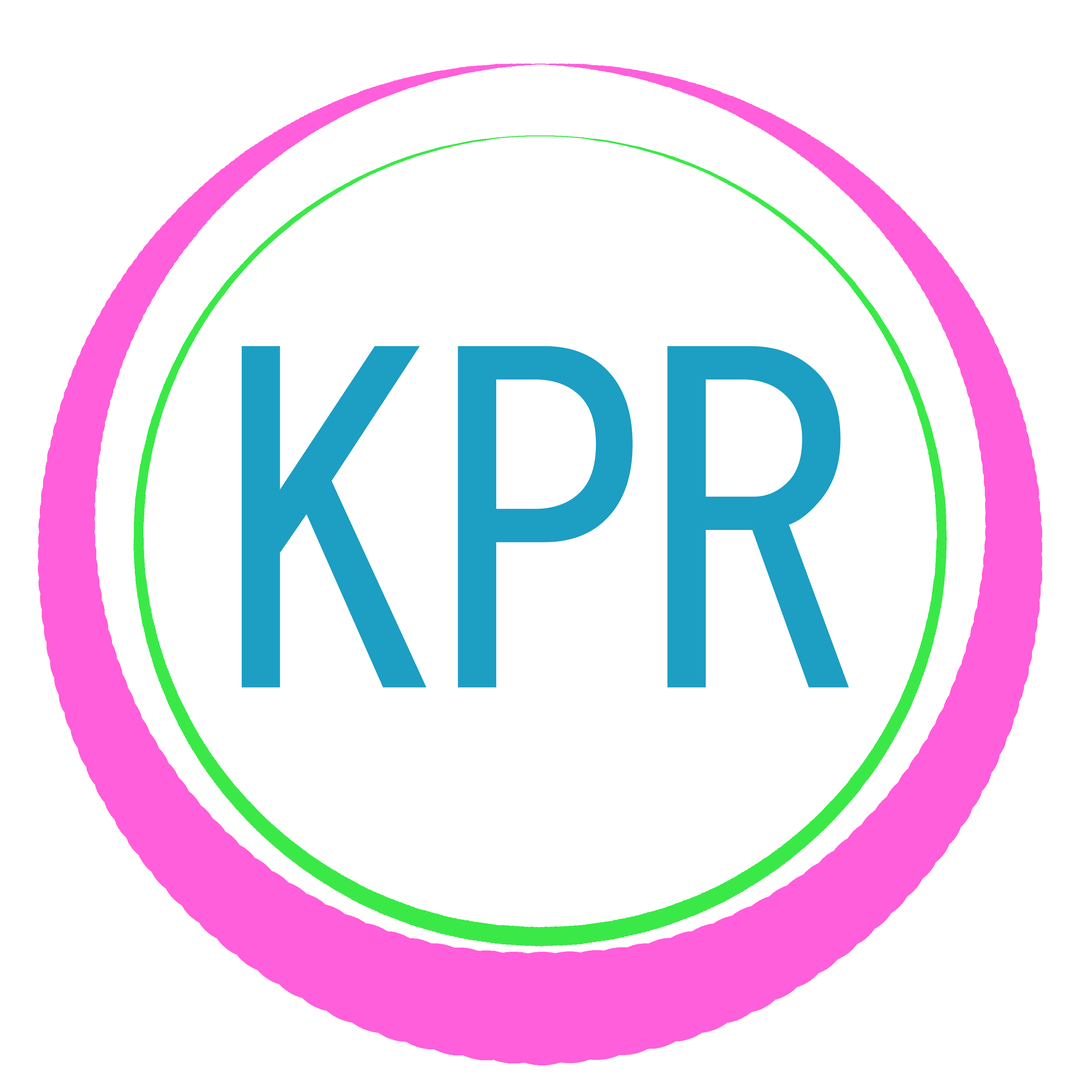
<style>
.page{position:relative;width:1092px;height:1092px;background:#ffffff}
.page>*{position:absolute;margin:0}
.t1{font:447.9px "MS-Gothic";color:#1d9ec3;scale:0.95 1}
</style>
<div class="page">
<p class="t1" style="left:242px;top:346px;width:607px;height:342px">KPR</p>
</div>
